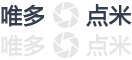
<style>
.page{position:relative;width:132px;height:60px;background:#ffffff}
.page>*{position:absolute;margin:0}
.t1{font:22.2px "MicrosoftYaHei";color:#363f4e;font-weight:bold}
.t2{font:22.2px "MicrosoftYaHei";color:#e5e5e5;font-weight:bold}
</style>
<div class="page">
<p class="t1" style="left:1px;top:5px;width:44px;height:22px">唯多</p>
<p class="t1" style="left:86px;top:4px;width:46px;height:23px">点米</p>
<p class="t2" style="left:1px;top:35px;width:44px;height:22px">唯多</p>
<p class="t2" style="left:86px;top:34px;width:46px;height:23px">点米</p>
</div>
